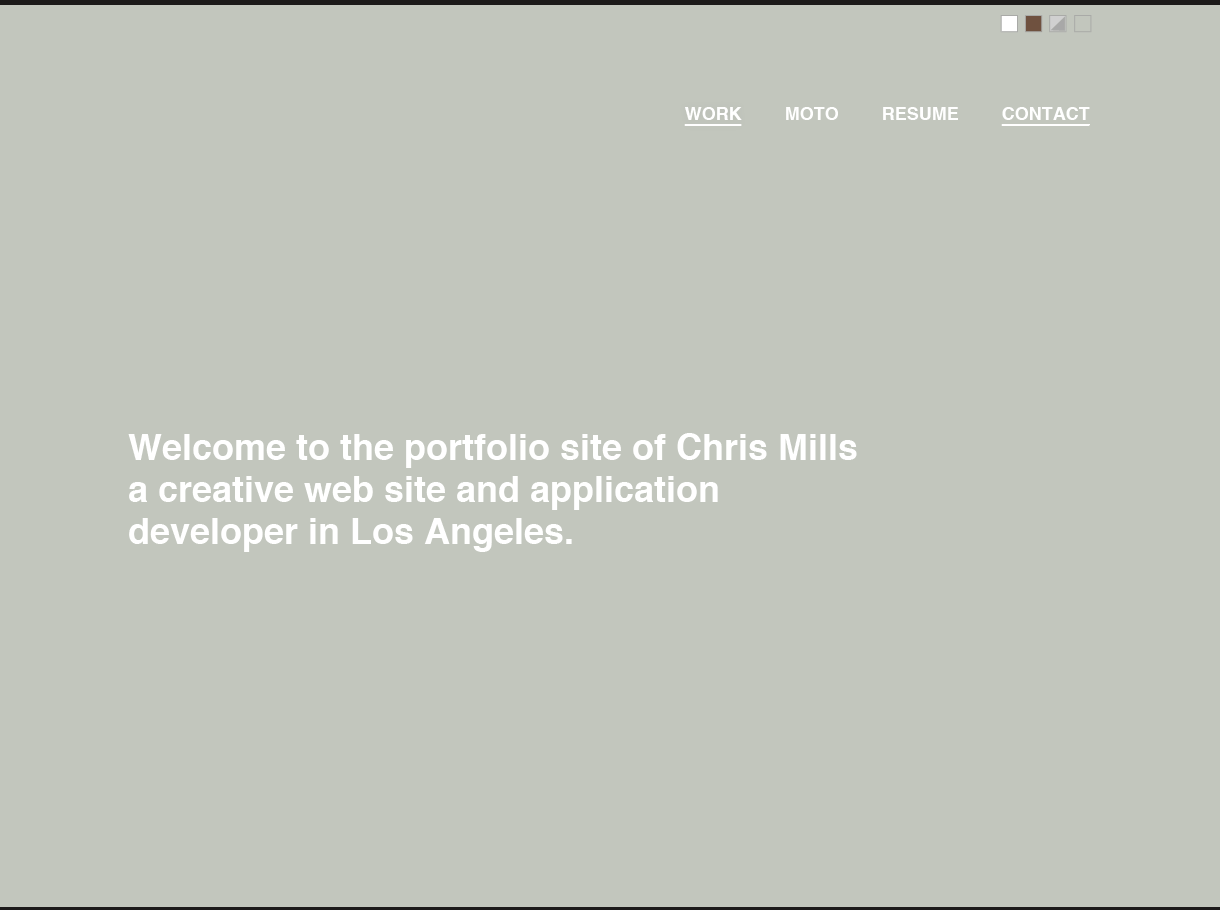
<style>
.page{position:relative;width:1220px;height:910px;background:#c2c6bd}
.page>*{position:absolute;margin:0}
.t1{font:18px "Helvetica-Bold";color:#ffffff;text-decoration:underline}
.t2{font:18px "Helvetica-Bold";color:#ffffff}
.t3{font:36px/42px "Helvetica-Bold";color:#ffffff}
</style>
<div class="page">
<p class="t1" style="left:684px;top:107px;width:58px;height:19px">WORK</p>
<p class="t2" style="left:786px;top:107px;width:52px;height:13px">MOTO</p>
<p class="t2" style="left:883px;top:107px;width:75px;height:13px">RESUME</p>
<p class="t1" style="left:1001px;top:107px;width:89px;height:19px">CONTACT</p>
<p class="t3" style="left:128px;top:433px;width:729px;height:119px">Welcome to the portfolio site of Chris Mills<br>a creative web site and application<br>developer in Los Angeles.</p>
</div>
